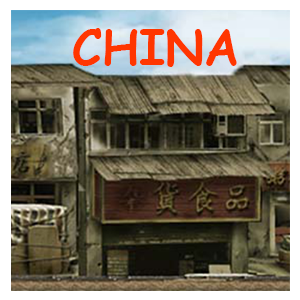
<style>
.page{position:relative;width:300px;height:300px}
.page>*{position:absolute;margin:0}
.t1{font:48px "ComicSansMS-Bold";color:#ff3600}
</style>
<div class="page">
<p class="t1" style="left:73px;top:28px;width:164px;height:39px">CHINA</p>
</div>
